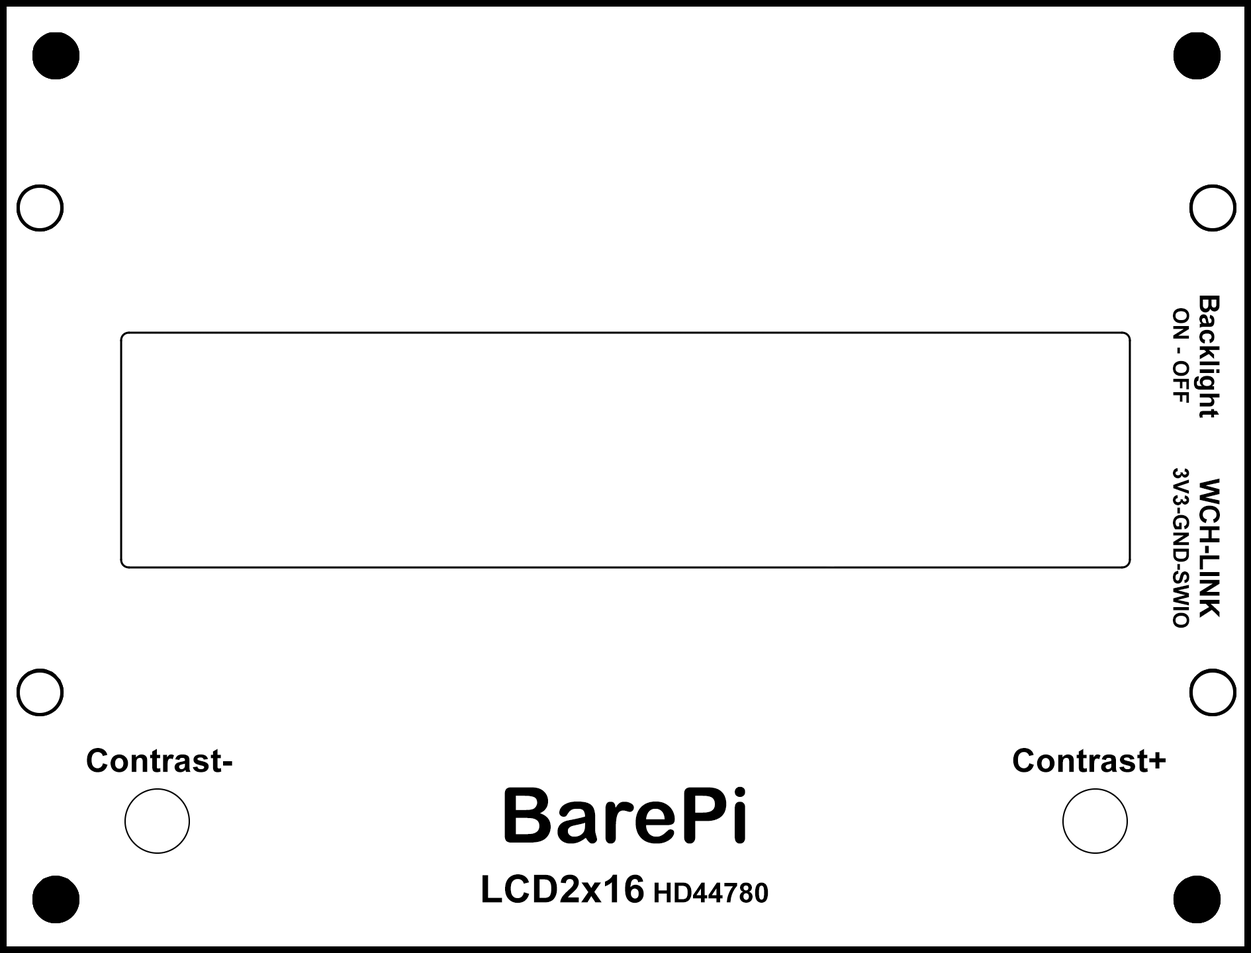
<style>
.page{position:relative;width:1251px;height:953px;background:#ffffff}
.page>*{position:absolute;margin:0}
.t1{font:27.6px "Arial-BoldMT";color:#000000}
.t2{font:22.1px "Arial-BoldMT";color:#000000}
.t3{font:33.1px "Arial-BoldMT";color:#000000}
.t4{font:77.2px "ArialRoundedMTBold";color:#000000}
.t5{font:38.6px "Arial-BoldMT";color:#000000}
</style>
<div class="page">
<p class="t1" style="left:1173px;top:296px;width:46px;height:122px;text-align:center;rotate:90deg">Backlight<br><span class="t2">ON - OFF</span></p>
<p class="t2" style="left:1173px;top:468px;width:46px;height:161px;text-align:center;rotate:90deg"><span class="t1">WCH-LINK<br></span>3V3-GND-SWIO</p>
<p class="t3" style="left:87px;top:748px;width:145px;height:25px">Contrast-</p>
<p class="t3" style="left:1012px;top:748px;width:153px;height:25px">Contrast+</p>
<p class="t4" style="left:504px;top:787px;width:241px;height:57px">BarePi</p>
<p class="t5" style="left:482px;top:875px;width:286px;height:29px">LCD2x16<span class="t1"> HD44780</span></p>
</div>
